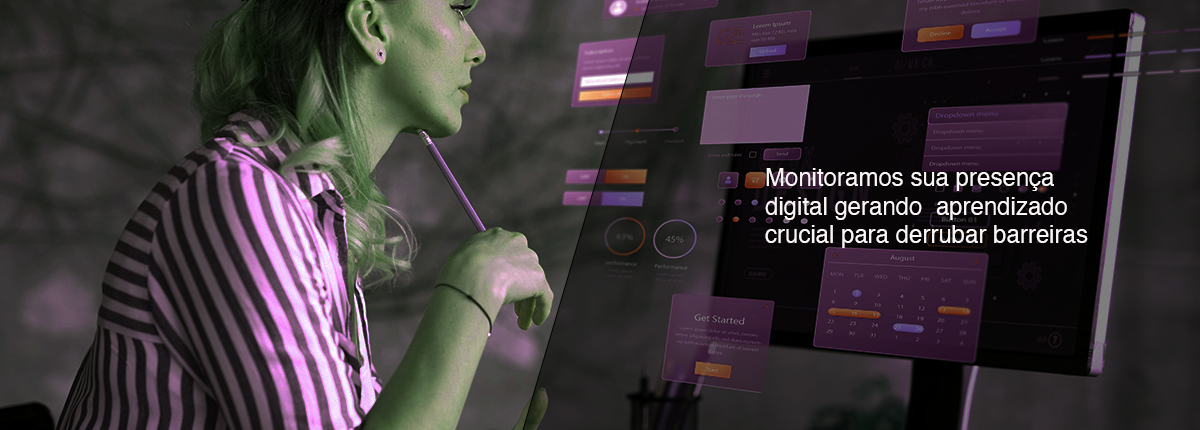
<style>
.page{position:relative;width:1200px;height:430px}
.page>*{position:absolute;margin:0}
.t1{font:24px "Helvetica";color:#fcf7f7}
</style>
<div class="page">
<p class="t1" style="left:765px;top:168px;width:323px;height:80px">Monitoramos sua presença<br>digital gerando  aprendizado<br>crucial para derrubar barreiras</p>
</div>
